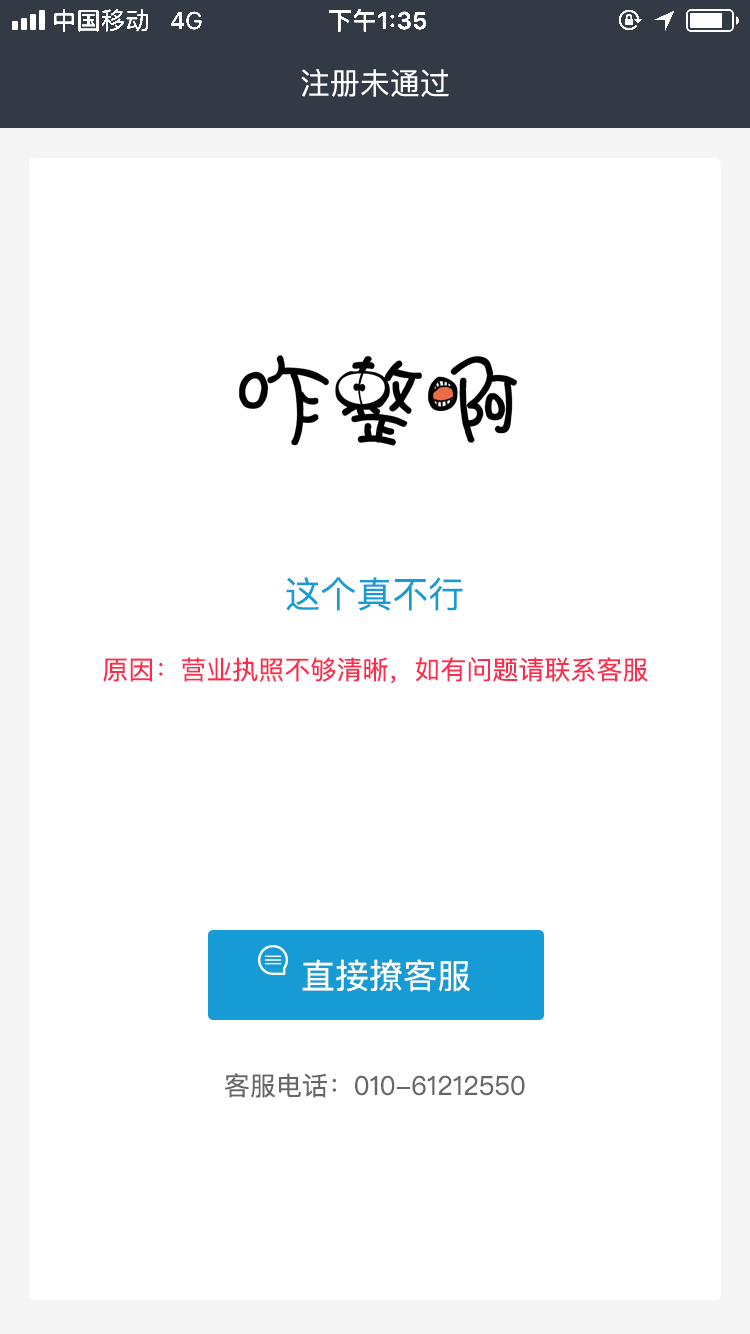
<style>
.page{position:relative;width:750px;height:1334px;background:#ffffff}
.page>*{position:absolute;margin:0}
.t1{font:30px "PingFang-SC-Medium";color:#ffffff}
.t2{font:36px "PingFangSC-Regular";color:#169bd5}
.t3{font:26px "PingFangSC-Regular";color:#ff2b4d}
.t4{font:34px "PingFangSC-Regular";color:#ffffff}
.t5{font:26px "PingFangSC-Regular";color:#666666}
</style>
<div class="page">
<p class="t1" style="left:301px;top:69px;width:148px;height:28px">注册未通过</p>
<p class="t2" style="left:286px;top:577px;width:177px;height:34px">这个真不行</p>
<p class="t3" style="left:103px;top:657px;width:545px;height:26px">原因：营业执照不够清晰，如有问题请联系客服</p>
<p class="t4" style="left:302px;top:959px;width:168px;height:33px">直接撩客服</p>
<p class="t5" style="left:224px;top:1073px;width:301px;height:25px">客服电话：010-61212550</p>
</div>
